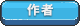
<style>
.page{position:relative;width:80px;height:26px;background:#3db3e3}
.page>*{position:absolute;margin:0}
.t1{font:12.5px "SourceHanSansCN-Bold";letter-spacing:0.12em;color:#f1f1f1}
</style>
<div class="page">
<p class="t1" style="left:27px;top:3px;width:26px;height:13px">作者</p>
</div>
